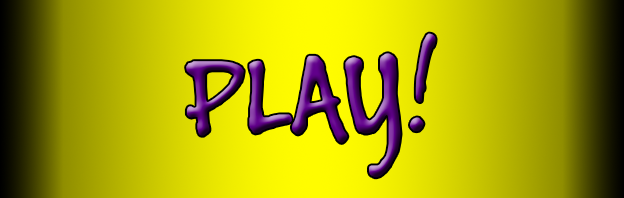
<style>
.page{position:relative;width:624px;height:198px}
.page>*{position:absolute;margin:0}
.t1{font:120px "BuxtonSketch"}
</style>
<div class="page">
<p class="t1" style="left:186px;top:33px;width:250px;height:145px">PLAY!</p>
</div>
